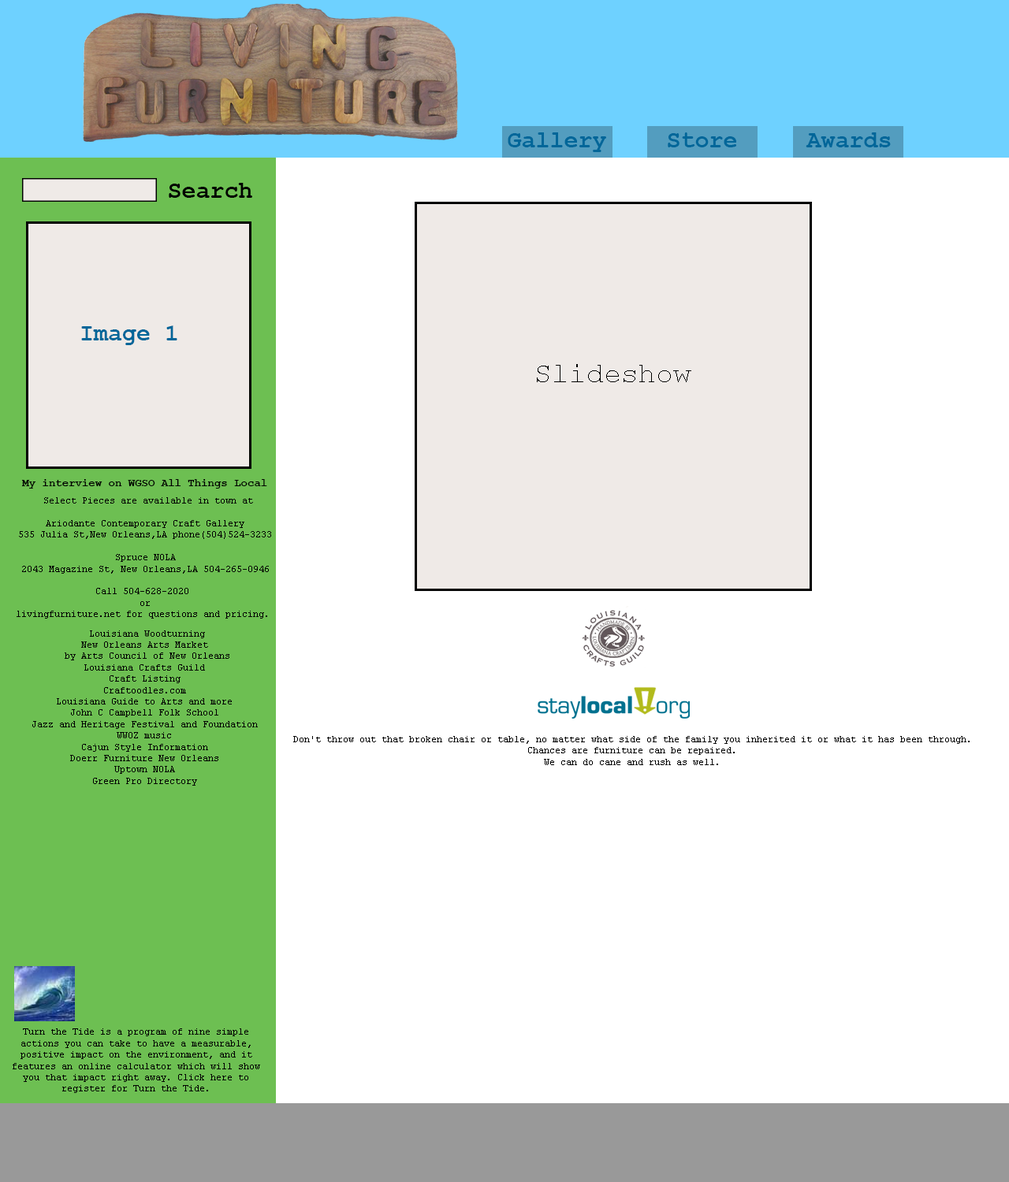
<style>
.page{position:relative;width:1009px;height:1182px;background:#ffffff}
.page>*{position:absolute;margin:0}
.t1{font:23.6px "CourierNewPS-BoldMT";color:#006699}
.t2{font:23.6px "CourierNewPS-BoldMT";color:#000000}
.t3{font:28.4px "CourierNewPSMT";color:#000000}
.t4{font:11px "CourierNewPS-BoldMT";color:#000000}
.t5{font:9.5px "CourierNewPSMT";color:#000000}
</style>
<div class="page">
<p class="t1" style="left:508px;top:132px;width:98px;height:20px">Gallery</p>
<p class="t1" style="left:667px;top:132px;width:69px;height:15px">Store</p>
<p class="t1" style="left:805px;top:132px;width:86px;height:15px">Awards</p>
<p class="t2" style="left:169px;top:183px;width:83px;height:15px">Search</p>
<p class="t1" style="left:81px;top:325px;width:96px;height:20px">Image 1</p>
<p class="t3" style="left:537px;top:364px;width:154px;height:18px">Slideshow</p>
<p class="t4" style="left:21px;top:479px;width:246px;height:10px">My interview on WGSO All Things Local</p>
<p class="t5" style="left:17px;top:497px;width:254px;height:122px;text-align:center">Select Pieces are available in town at<br><br>Ariodante Contemporary Craft Gallery<br>535 Julia St,New Orleans,LA phone(504)524-3233<br><br>Spruce NOLA<br>2043 Magazine St, New Orleans,LA 504-265-0946<br><br>Call 504-628-2020 <br>or<br>livingfurniture.net for questions and pricing.</p>
<p class="t5" style="left:32px;top:630px;width:226px;height:156px;text-align:center">Louisiana Woodturning<br>New Orleans Arts Market<br> by Arts Council of New Orleans<br>Louisiana Crafts Guild<br>Craft Listing<br>Craftoodles.com<br>Louisiana Guide to Arts and more<br>John C Campbell Folk School<br>Jazz and Heritage Festival and Foundation<br>WWOZ music<br>Cajun Style Information<br>Doerr Furniture New Orleans<br>Uptown NOLA<br>Green Pro Directory</p>
<p class="t5" style="left:293px;top:736px;width:676px;height:29px;text-align:center">Don't throw out that broken chair or table, no matter what side of the family you inherited it or what it has been through.<br>Chances are furniture can be repaired.<br>We can do cane and rush as well.</p>
<p class="t5" style="left:13px;top:1028px;width:247px;height:65px;text-align:center">Turn the Tide is a program of nine simple actions you can take to have a measurable, positive impact on the environment, and it features an online calculator which will show you that impact right away. Click here to register for Turn the Tide.</p>
</div>
